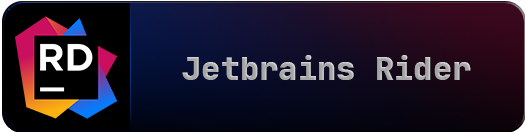
<style>
.page{position:relative;width:525px;height:133px}
.page>*{position:absolute;margin:0}
.t1{font:32.1px "JetBrainsMono-ExtraBold";color:#a9a9a9}
</style>
<div class="page">
<p class="t1" style="left:182px;top:55px;width:289px;height:25px">Jetbrains Rider</p>
</div>
